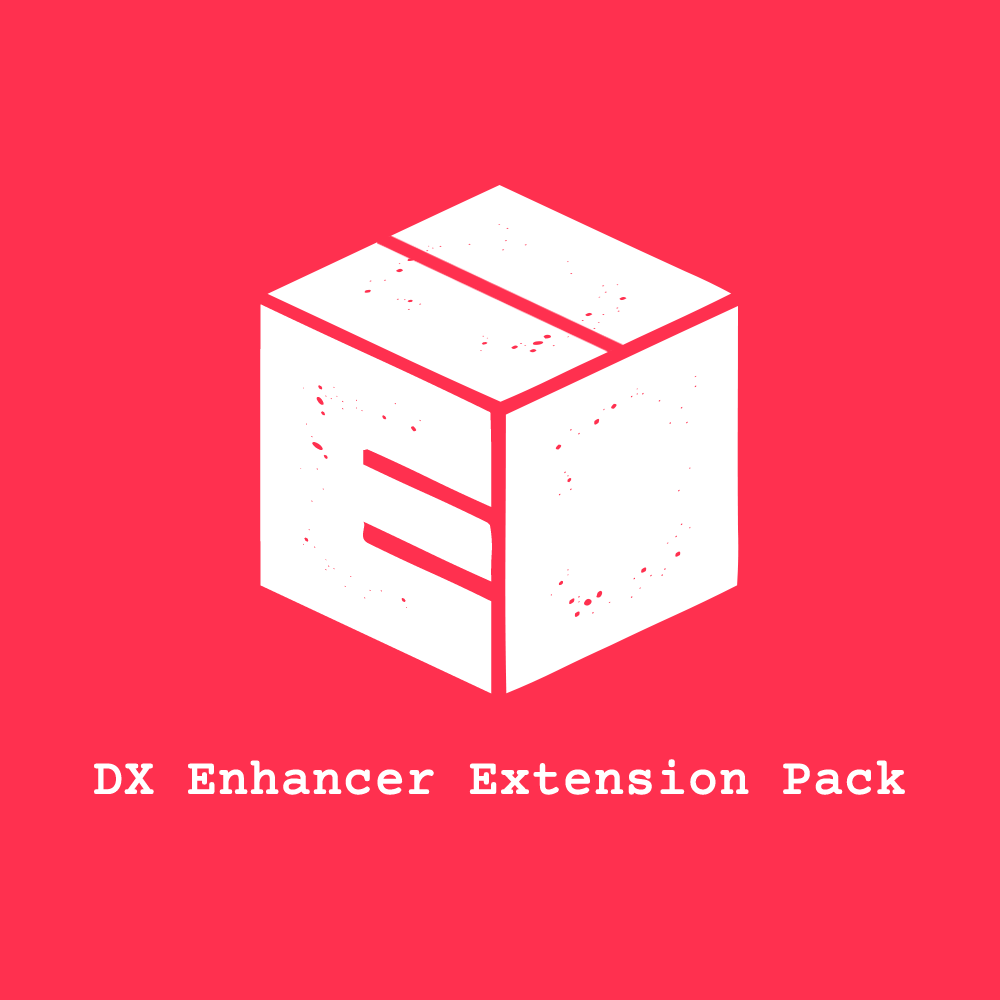
<style>
.page{position:relative;width:1000px;height:1000px;background:#ff304f}
.page>*{position:absolute;margin:0}
.t1{font:402.9px "ManiacGrunged-Regular";color:#ffffff;scale:1.24 1}
.t2{font:50px "CourierPrime-Regular";color:#ffffff;font-weight:bold}
</style>
<div class="page">
<p class="t1" style="left:260px;top:304px;width:232px;height:390px;rotate:25deg">E</p>
<p class="t2" style="left:94px;top:759px;width:811px;height:36px">DX Enhancer Extension Pack</p>
</div>
